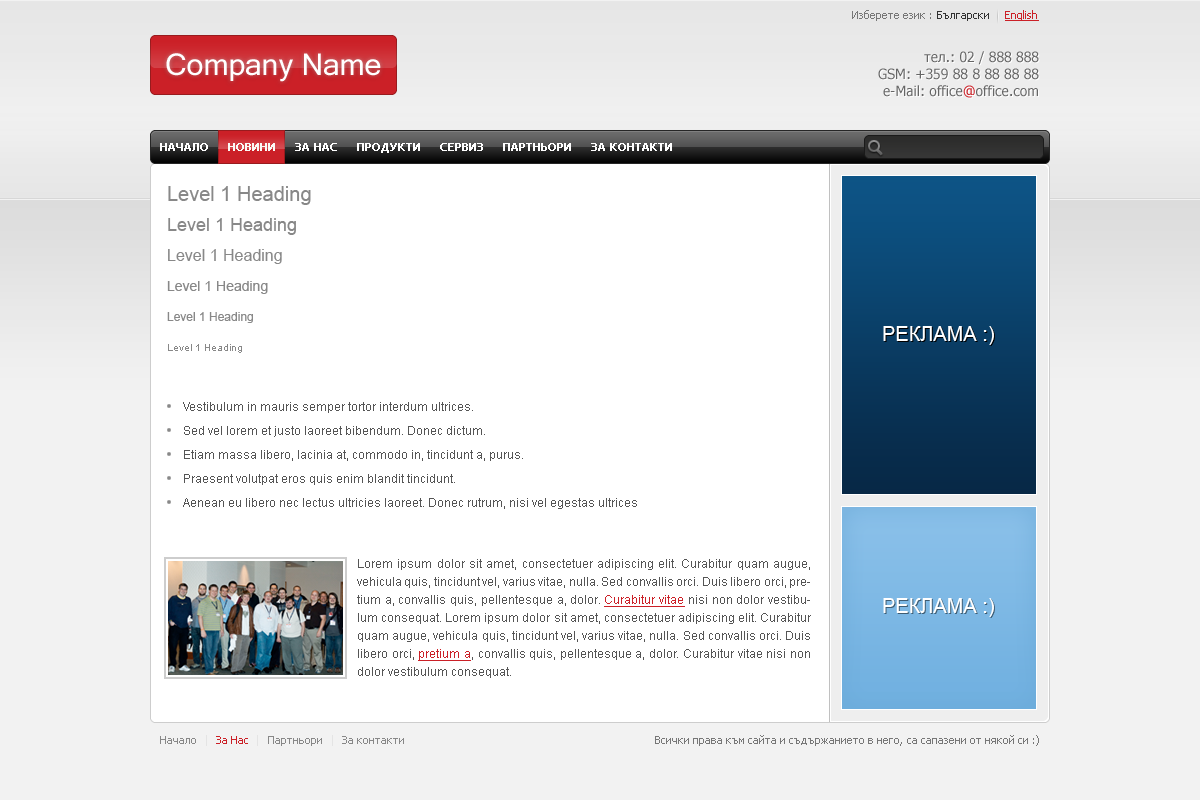
<style>
.page{position:relative;width:1200px;height:800px;background:#ffffff}
.page>*{position:absolute;margin:0}
.t1{font:11px "Tahoma";color:#777777}
.t2{font:11px "Tahoma";color:#333333}
.t3{font:11px "Tahoma";color:#cb2027;text-decoration:underline}
.t4{font:30px "MicrosoftSansSerif";color:#ffffff}
.t5{font:14px "Tahoma";color:#666666}
.t6{font:14px "Tahoma";color:#cb2027}
.t7{font:11px "Tahoma";color:#ffffff;text-transform:uppercase;font-weight:bold}
.t8{font:11px "Tahoma";color:#fafaf6;text-transform:uppercase;font-weight:bold}
.t9{font:20px "ArialMT";color:#888888}
.t10{font:18px "ArialMT";color:#888888}
.t11{font:16px "ArialMT";color:#888888}
.t12{font:14px "ArialMT";color:#888888}
.t13{font:12px "ArialMT";color:#888888}
.t14{font:20px "ArialMT";color:#ffffff}
.t15{font:20px "ArialMT"}
.t16{font:10px "ArialMT";color:#888888}
.t17{font:12px/24px "ArialMT";color:#555555}
.t18{font:12px/18px "ArialMT";color:#555555}
.t19{font:12px/18px "ArialMT";color:#cb2027;text-decoration:underline}
.t20{font:11px "Tahoma";color:#888888}
.t21{font:11px "Tahoma";color:#cb2027}
</style>
<div class="page">
<p class="t1" style="left:852px;top:10px;width:79px;height:11px">Изберете език :</p>
<p class="t2" style="left:937px;top:11px;width:52px;height:10px">Български</p>
<p class="t3" style="left:1005px;top:10px;width:34px;height:11px">English</p>
<p class="t4" style="left:166px;top:53px;width:215px;height:29px">Company Name</p>
<p class="t5" style="left:878px;top:51px;width:161px;height:47px;text-align:right">тел.: 02 / 888 888<br>GSM: +359 88 8 88 88 88<br>e-Mail: office<span class="t6">@</span>office.com</p>
<p class="t7" style="left:160px;top:143px;width:48px;height:8px">Нaчало</p>
<p class="t8" style="left:228px;top:143px;width:47px;height:8px">Новини</p>
<p class="t7" style="left:295px;top:143px;width:42px;height:8px">ЗА НАС</p>
<p class="t7" style="left:357px;top:143px;width:63px;height:10px">ПРОДУКТИ</p>
<p class="t7" style="left:440px;top:143px;width:43px;height:8px">СЕРВИЗ</p>
<p class="t7" style="left:503px;top:143px;width:68px;height:8px">ПАРТНЬОРИ</p>
<p class="t7" style="left:591px;top:143px;width:81px;height:8px">ЗА КОНТАКТИ</p>
<p class="t9" style="left:168px;top:186px;width:143px;height:19px">Level 1 Heading</p>
<p class="t10" style="left:168px;top:218px;width:128px;height:17px">Level 1 Heading</p>
<p class="t11" style="left:168px;top:249px;width:114px;height:15px">Level 1 Heading</p>
<p class="t12" style="left:167px;top:281px;width:101px;height:13px">Level 1 Heading</p>
<p class="t13" style="left:167px;top:312px;width:86px;height:11px">Level 1 Heading</p>
<p class="t14" style="left:883px;top:326px;width:111px;height:19px">РЕКЛАМА :)</p>
<p class="t15" style="left:884px;top:327px;width:111px;height:19px">РЕКЛАМА :)</p>
<p class="t16" style="left:168px;top:344px;width:74px;height:9px">Level 1 Heading</p>
<p class="t17" style="left:183px;top:402px;width:454px;height:107px">Vestibulum in mauris semper tortor interdum ultrices.<br>Sed vel lorem et justo laoreet bibendum. Donec dictum.<br>Etiam massa libero, lacinia at, commodo in, tincidunt a, purus.<br>Praesent volutpat eros quis enim blandit tincidunt.<br>Aenean eu libero nec lectus ultricies laoreet. Donec rutrum, nisi vel egestas ultrices</p>
<p class="t18" style="left:357px;top:559px;width:454px;height:119px;text-align:justify">Lorem ipsum dolor sit amet, consectetuer adipiscing elit. Curabitur quam augue, vehicula quis, tincidunt vel, varius vitae, nulla. Sed convallis orci. Duis libero orci, pretium a, convallis quis, pellentesque a, dolor. <span class="t19">Curabitur vitae</span> nisi non dolor vestibulum consequat. Lorem ipsum dolor sit amet, consectetuer adipiscing elit. Curabitur quam augue, vehicula quis, tincidunt vel, varius vitae, nulla. Sed convallis orci. Duis libero orci, <span class="t19">pretium a</span>, convallis quis, pellentesque a, dolor. Curabitur vitae nisi non dolor vestibulum consequat.</p>
<p class="t14" style="left:883px;top:598px;width:111px;height:19px">РЕКЛАМА :)</p>
<p class="t15" style="left:884px;top:599px;width:111px;height:19px">РЕКЛАМА :)</p>
<p class="t20" style="left:160px;top:736px;width:36px;height:8px">Начало</p>
<p class="t21" style="left:216px;top:736px;width:32px;height:8px">За Нас</p>
<p class="t20" style="left:268px;top:736px;width:54px;height:10px">Партньори</p>
<p class="t20" style="left:342px;top:736px;width:62px;height:8px">За контакти</p>
<p class="t1" style="left:655px;top:735px;width:384px;height:11px">Всички права към сайта и съдържанието в него, са сапазени от някой си :)</p>
</div>
